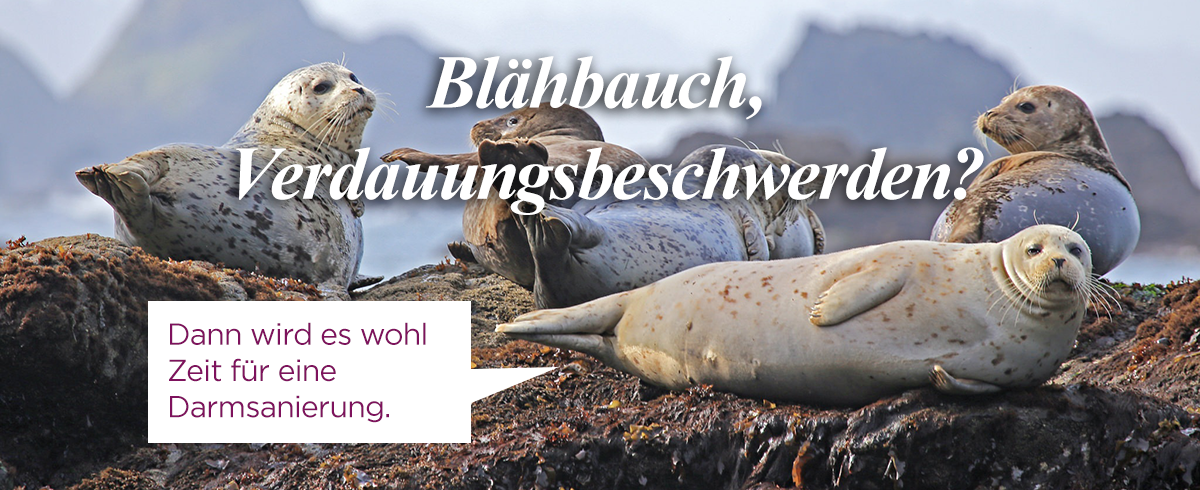
<style>
.page{position:relative;width:1200px;height:490px}
.page>*{position:absolute;margin:0}
.t1{font:76px "TimesNewRomanPS-BoldItalicMT";letter-spacing:-0.025em;color:#ffffff}
.t2{font:30.2px "Gotham-Book";letter-spacing:-0.025em;color:#7e125d}
</style>
<div class="page">
<p class="t1" style="left:236px;top:56px;width:748px;height:159px;text-align:center">Blähbauch, <br>Verdauungsbeschwerden?</p>
<p class="t2" style="left:169px;top:322px;width:257px;height:101px">Dann wird es wohl <br>Zeit für eine<br>Darmsanierung.</p>
</div>
